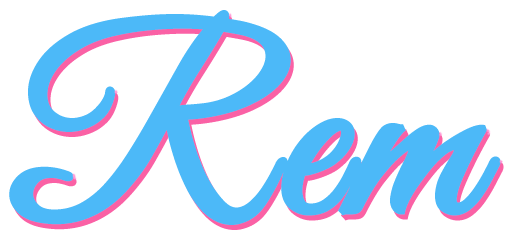
<style>
.page{position:relative;width:516px;height:239px;background:#ffffff}
.page>*{position:absolute;margin:0}
.t1{font:250px "GreatVibes-Regular";letter-spacing:0.02em;color:#4cb9f8;font-weight:bold}
</style>
<div class="page">
<p class="t1" style="left:9px;top:10px;width:492px;height:215px">Rem</p>
</div>
